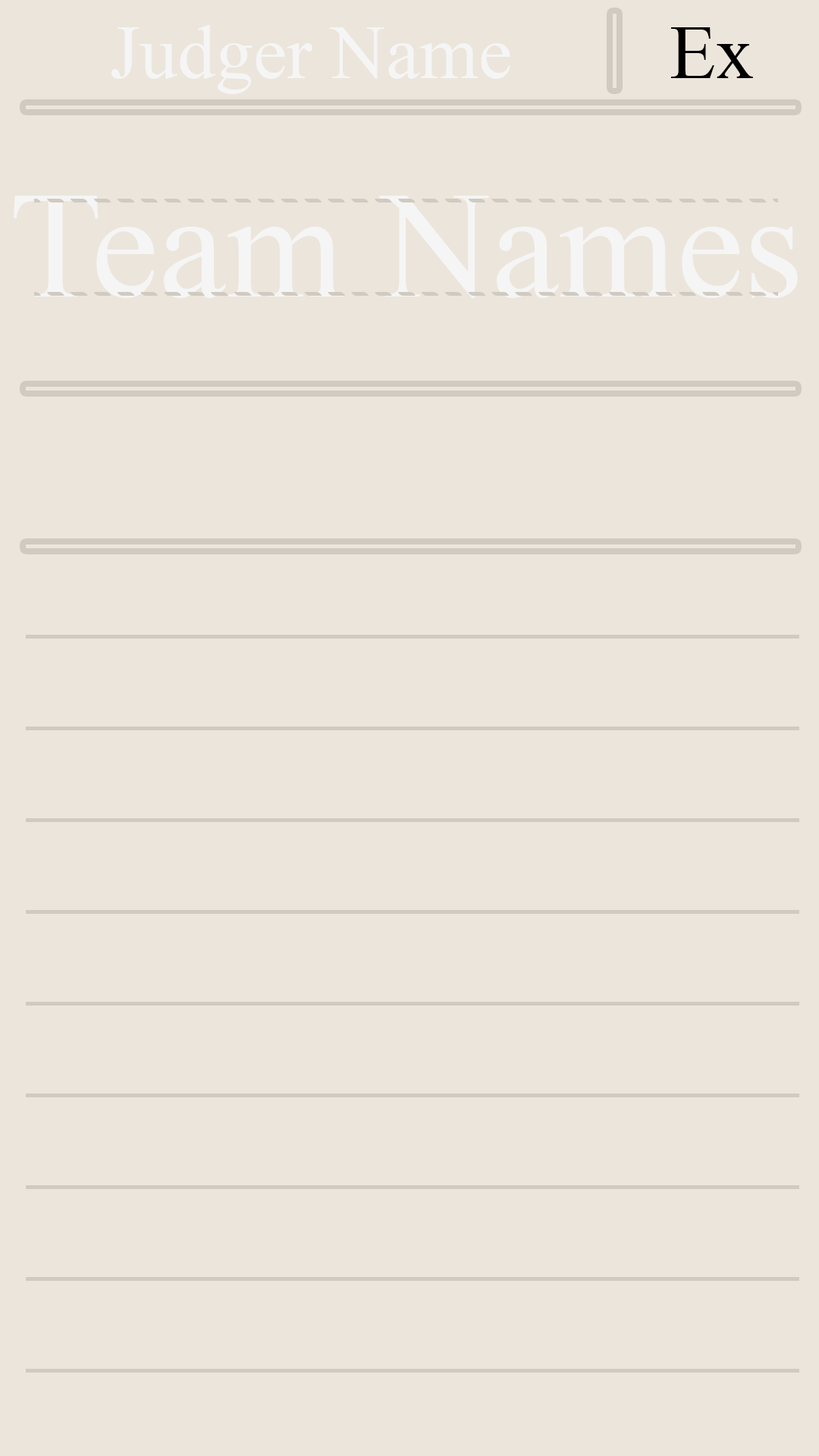
<style>
.page{position:relative;width:819px;height:1456px;background:#ece5db}
.page>*{position:absolute;margin:0}
.t1{font:75.8px "TimesNewRomanPSMT";color:#f5f5f5}
.t2{font:75.8px "TimesNewRomanPSMT";color:#000000}
.t3{font:151.7px "TimesNewRomanPSMT";color:#f5f5f5}
</style>
<div class="page">
<p class="t1" style="left:111px;top:25px;width:399px;height:69px">Judger Name</p>
<p class="t2" style="left:671px;top:27px;width:82px;height:51px">Ex</p>
<p class="t3" style="left:14px;top:196px;width:784px;height:103px">Team Names</p>
</div>
